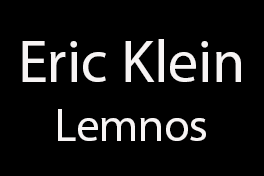
<style>
.page{position:relative;width:264px;height:176px;background:#000000}
.page>*{position:absolute;margin:0}
.t1{font:60px "MyriadPro-Regular";color:#f7f4f4}
.t2{font:46.7px "MyriadPro-Regular";color:#f7f4f4}
</style>
<div class="page">
<p class="t1" style="left:22px;top:39px;width:219px;height:43px">Eric Klein</p>
<p class="t2" style="left:58px;top:109px;width:148px;height:32px">Lemnos</p>
</div>
